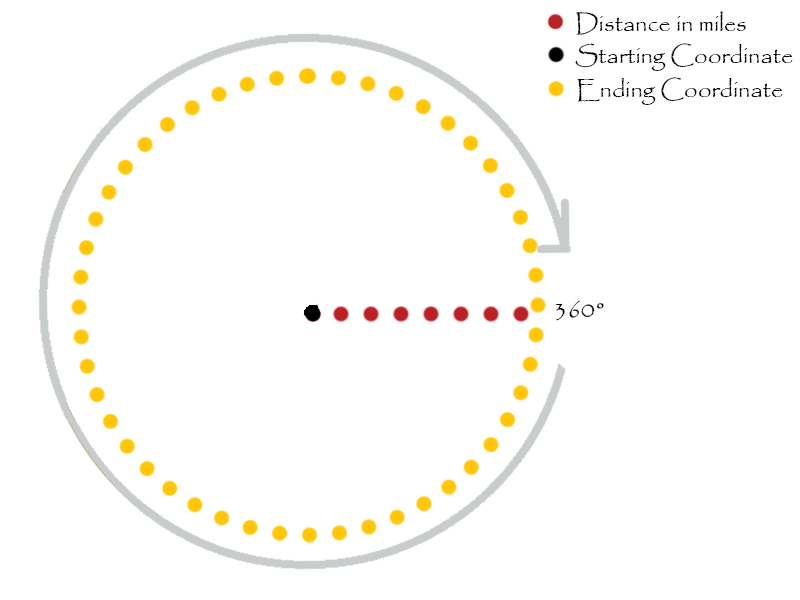
<style>
.page{position:relative;width:800px;height:600px;background:#ffffff}
.page>*{position:absolute;margin:0}
.t1{font:24px "Papyrus-Regular";color:#000000}
</style>
<div class="page">
<p class="t1" style="left:576px;top:11px;width:170px;height:24px">Distance in miles</p>
<p class="t1" style="left:575px;top:43px;width:218px;height:28px">Starting Coordinate</p>
<p class="t1" style="left:577px;top:77px;width:206px;height:28px">Ending Coordinate</p>
<p class="t1" style="left:555px;top:300px;width:49px;height:21px">360°</p>
</div>
